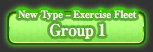
<style>
.page{position:relative;width:153px;height:52px}
.page>*{position:absolute;margin:0}
.t1{font:10px "RyuminPro-ExBold";letter-spacing:-0.04em;color:#fff6f1}
.t2{font:16px "RyuminPro-ExBold";letter-spacing:-0.04em;color:#fff6f1}
</style>
<div class="page">
<p class="t1" style="left:18px;top:10px;width:119px;height:10px">New Type – Exercise Fleet</p>
<p class="t2" style="left:50px;top:23px;width:55px;height:16px">Group 1</p>
</div>
